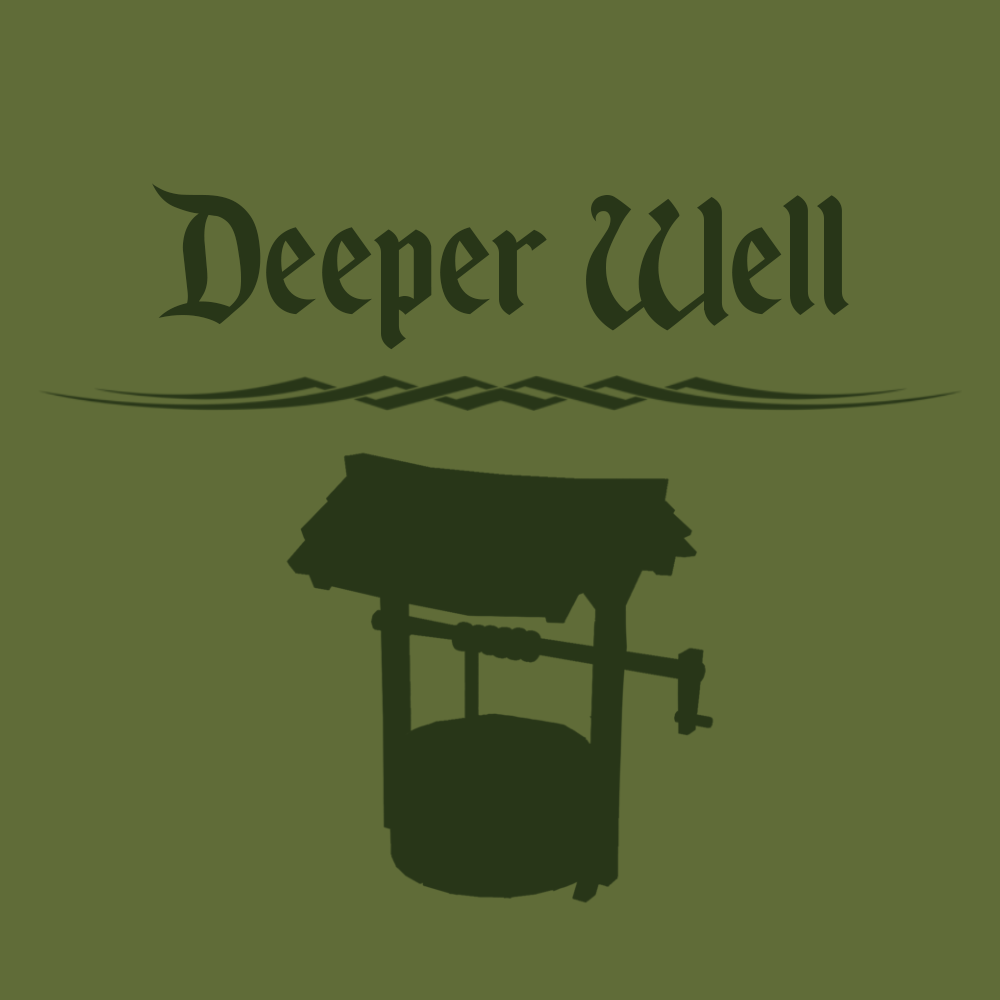
<style>
.page{position:relative;width:1000px;height:1000px;background:#606c38}
.page>*{position:absolute;margin:0}
.t1{font:200px "EnchantedLand";color:#283618}
</style>
<div class="page">
<p class="t1" style="left:152px;top:183px;width:697px;height:167px">Deeper  Well</p>
</div>
